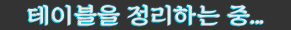
<style>
.page{position:relative;width:291px;height:30px;background:#333333}
.page>*{position:absolute;margin:0}
.t1{font:23.3px "SDKukdetopokki-aLt";color:#faffff;scale:1.08 1}
</style>
<div class="page">
<p class="t1" style="left:27px;top:4px;width:237px;height:22px;opacity:0.9">테이블을 정리하는 중...</p>
</div>
